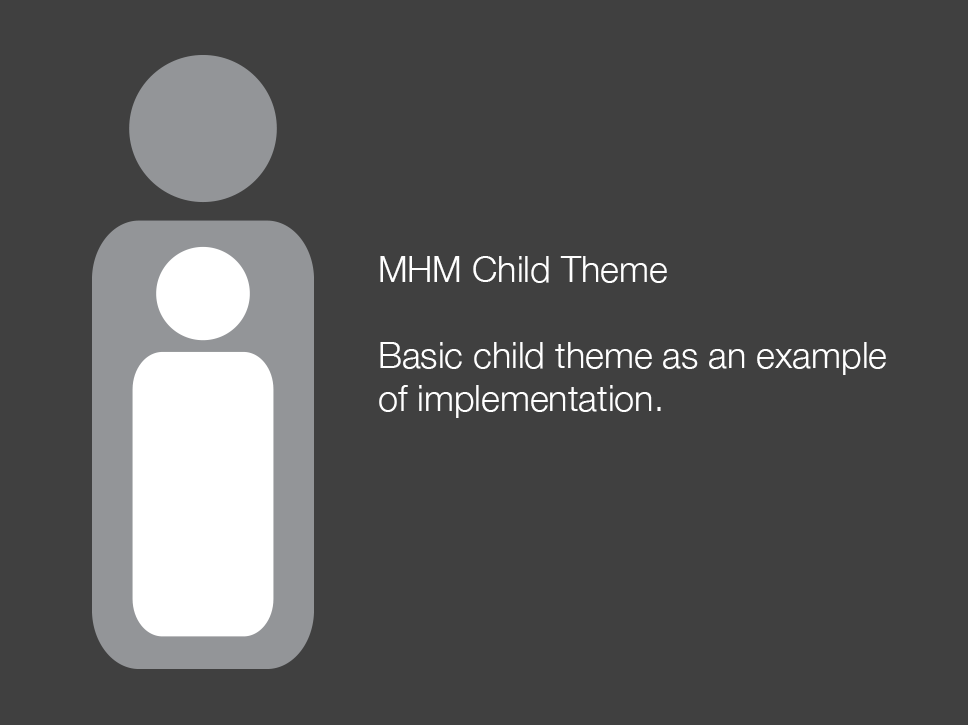
<style>
.page{position:relative;width:968px;height:725px;background:#404040}
.page>*{position:absolute;margin:0}
.t1{font:36px "HelveticaNeue-Light";color:#ffffff}
</style>
<div class="page">
<p class="t1" style="left:379px;top:256px;width:507px;height:162px">MHM Child Theme<br><br>Basic child theme as an example <br>of implementation.</p>
</div>
